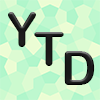
<style>
.page{position:relative;width:100px;height:100px}
.page>*{position:absolute;margin:0}
.t1{font:48px "ArialRoundedMTBold";color:#2a2a2a}
</style>
<div class="page">
<p class="t1" style="left:8px;top:12px;width:28px;height:35px">Y</p>
<p class="t1" style="left:34px;top:32px;width:30px;height:34px">T</p>
<p class="t1" style="left:64px;top:51px;width:31px;height:34px">D</p>
</div>
